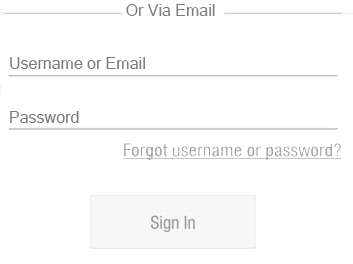
<style>
.page{position:relative;width:353px;height:264px;background:#ffffff}
.page>*{position:absolute;margin:0}
.t1{font:16px "MicrosoftSansSerif";color:#7a7a7a}
.t2{font:29.3px "ARBERKLEY";color:#7a7a7a}
</style>
<div class="page">
<p class="t1" style="left:126px;top:4px;width:89px;height:12px">Or Via Email<br><span class="t2"><br><br> fkfkO</span></p>
<p class="t1" style="left:10px;top:57px;width:135px;height:12px">Username or Email</p>
<p class="t1" style="left:10px;top:111px;width:69px;height:12px">Password</p>
</div>
